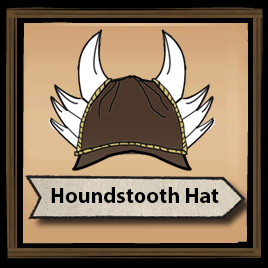
<style>
.page{position:relative;width:268px;height:268px}
.page>*{position:absolute;margin:0}
.t1{font:16.6px "MyriadPro-Bold";color:#000000}
</style>
<div class="page">
<p class="t1" style="left:51px;top:187px;width:168px;height:16px">Houndstooth Hat</p>
</div>
